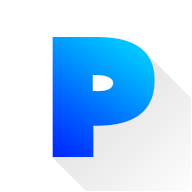
<style>
.page{position:relative;width:192px;height:192px;background:#ffffff}
.page>*{position:absolute;margin:0}
.t1{font:150px "SansPosterBoldJL"}
</style>
<div class="page">
<p class="t1" style="left:52px;top:37px;width:103px;height:120px">P</p>
</div>
